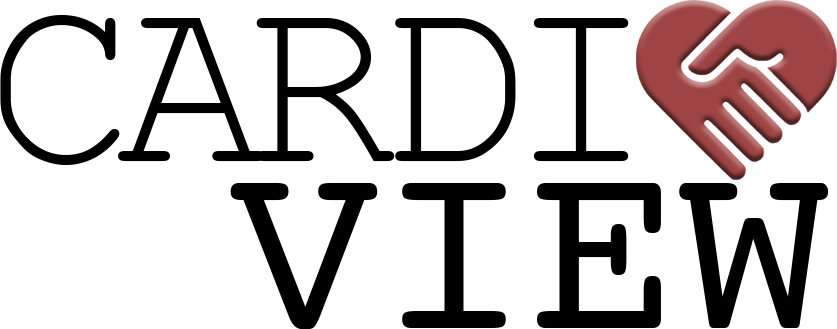
<style>
.page{position:relative;width:837px;height:329px;background:#ffffff}
.page>*{position:absolute;margin:0}
.t1{font:250px "CourierNewPSMT";letter-spacing:-0.08em;color:#000000;text-transform:uppercase}
.t2{font:250px "Courier";color:#000000;text-transform:uppercase}
</style>
<div class="page">
<p class="t1" style="left:0px;top:15px;width:629px;height:150px">cardi</p>
<p class="t2" style="left:230px;top:183px;width:599px;height:146px">View</p>
</div>
